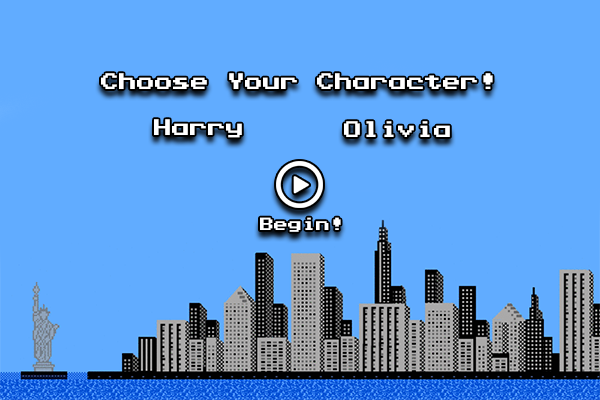
<style>
.page{position:relative;width:600px;height:400px;background:#61acff}
.page>*{position:absolute;margin:0}
.t1{font:18px "PressStartK";color:#ffffff}
.t2{font:14px "PressStartK";color:#ffffff}
</style>
<div class="page">
<p class="t1" style="left:101px;top:73px;width:392px;height:16px">Choose Your Character!</p>
<p class="t1" style="left:154px;top:119px;width:88px;height:19px">Harry</p>
<p class="t1" style="left:344px;top:121px;width:106px;height:16px">Olivia</p>
<p class="t2" style="left:260px;top:217px;width:81px;height:15px">Begin!</p>
</div>
